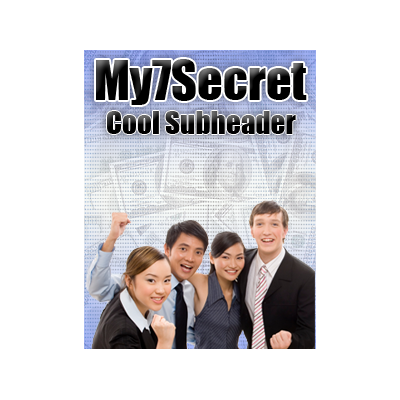
<style>
.page{position:relative;width:400px;height:400px;background:#ffffff}
.page>*{position:absolute;margin:0}
.t1{font:50px "Impact";color:#000000}
.t2{font:29.2px "Impact";color:#000000}
</style>
<div class="page">
<p class="t1" style="left:96px;top:59px;width:211px;height:46px">My7Secret</p>
<p class="t2" style="left:107px;top:111px;width:189px;height:23px">Cool Subheader</p>
</div>
